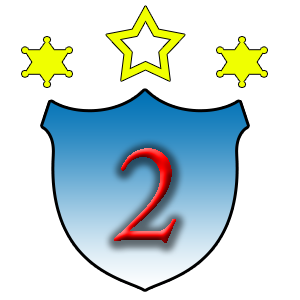
<style>
.page{position:relative;width:300px;height:300px;background:#ffffff}
.page>*{position:absolute;margin:0}
.t1{font:135px "ACaslonPro-Regular"}
</style>
<div class="page">
<p class="t1" style="left:114px;top:148px;width:62px;height:95px">2</p>
</div>
